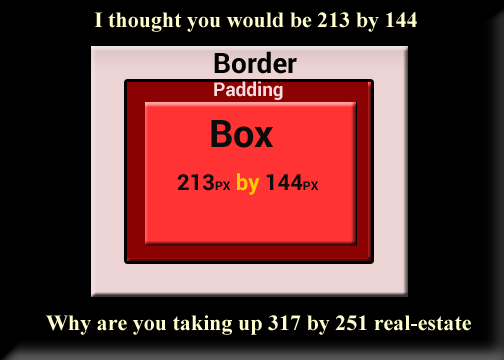
<style>
.page{position:relative;width:504px;height:360px;background:#000000}
.page>*{position:absolute;margin:0}
.t1{font:22px "TimesNewRomanPS-BoldMT";color:#ffffcc}
.t2{font:28px "Roboto-Bold";color:#010101}
.t3{font:19px "Roboto-Bold";color:#f7dede}
.t4{font:38px "Roboto-Bold";color:#0c0c0c}
.t5{font:22px "Roboto-Bold";color:#0c0c0c}
.t6{font:12px "Roboto-Bold";color:#0c0c0c}
.t7{font:22px "Roboto-Bold";color:#ffcc00}
</style>
<div class="page">
<p class="t1" style="left:94px;top:12px;width:323px;height:20px">I thought you would be 213 by 144</p>
<p class="t2" style="left:214px;top:51px;width:83px;height:23px">Border</p>
<p class="t3" style="left:214px;top:81px;width:69px;height:19px">Padding</p>
<p class="t4" style="left:211px;top:120px;width:63px;height:28px">Box</p>
<p class="t5" style="left:177px;top:173px;width:142px;height:22px">213<span class="t6">PX </span><span class="t7">by</span> 144<span class="t6">PX</span></p>
<p class="t1" style="left:46px;top:315px;width:425px;height:20px">Why are you taking up 317 by 251 real-estate</p>
</div>
